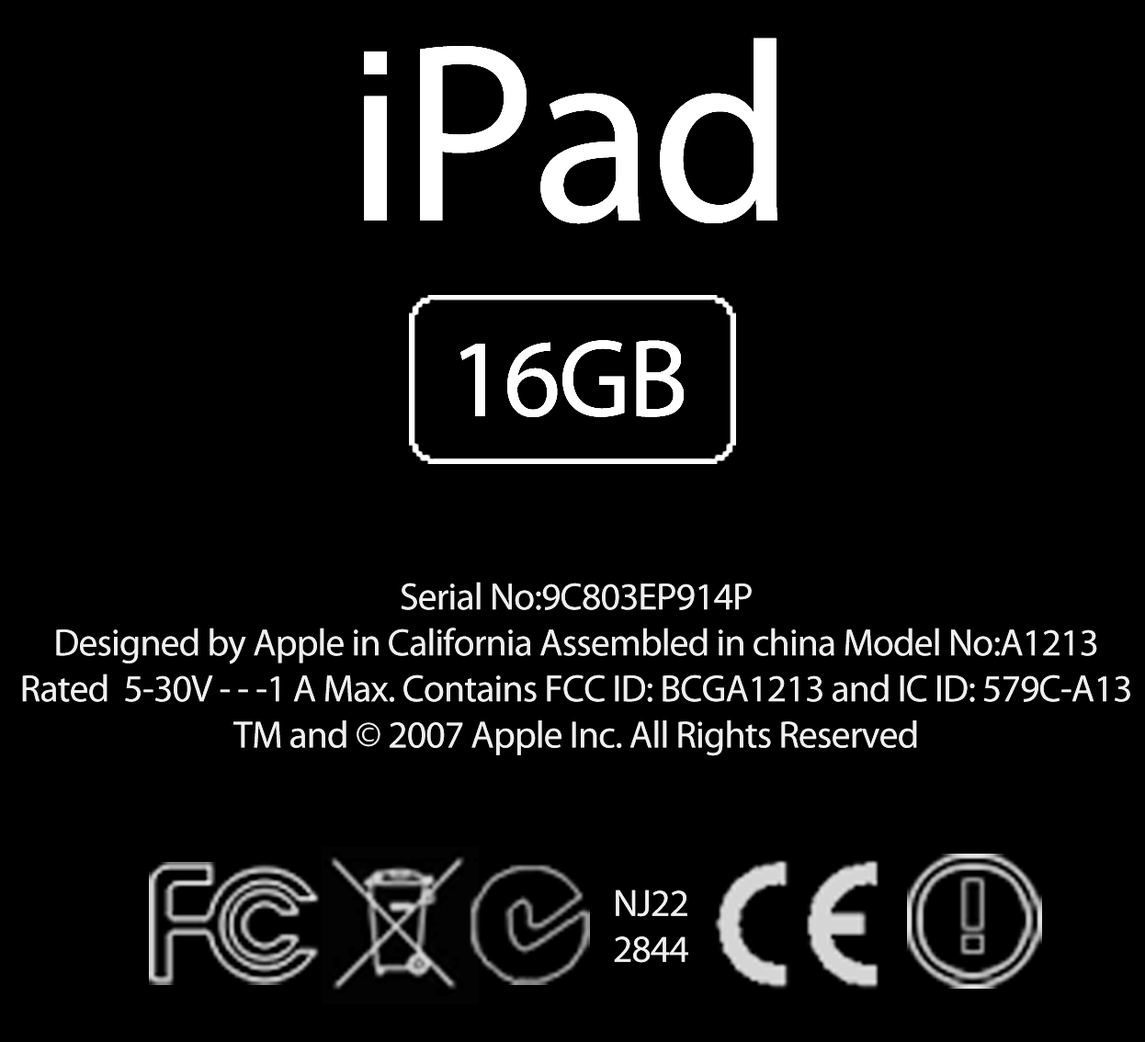
<style>
.page{position:relative;width:1145px;height:1042px;background:#000000}
.page>*{position:absolute;margin:0}
.t1{font:256.6px "MyriadPro-Regular";letter-spacing:-0.02em;color:#ffffff}
.t2{font:111.1px "MyriadPro-Regular";letter-spacing:-0.02em;color:#ffffff}
.t3{font:38.3px "MyriadPro-Regular";letter-spacing:-0.02em;color:#ffffff}
</style>
<div class="page">
<p class="t1" style="left:361px;top:38px;width:416px;height:186px">iPad</p>
<p class="t2" style="left:460px;top:340px;width:223px;height:77px">16GB</p>
<p class="t3" style="left:22px;top:582px;width:1108px;height:174px;text-align:center;opacity:0.5">Serial No:9C803EP914P<br>Designed by Apple in California Assembled in china Model No:A1213<br>Rated  5-30V - - -1 A Max. Contains FCC ID: BCGA1213 and IC ID: 579C-A13<br>TM and © 2007 Apple Inc. All Rights Reserved</p>
<p class="t3" style="left:614px;top:889px;width:74px;height:74px;text-align:center">NJ22<br>2844</p>
</div>
